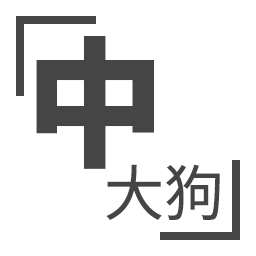
<style>
.page{position:relative;width:256px;height:256px;background:#ffffff}
.page>*{position:absolute;margin:0}
.t1{font:140px "SourceHanSansHC-Heavy";color:#454545}
.t2{font:60px "SourceHanSansHC-Regular";color:#454545}
</style>
<div class="page">
<p class="t1" style="left:36px;top:36px;width:118px;height:133px">中</p>
<p class="t2" style="left:106px;top:164px;width:114px;height:56px">大狗</p>
</div>
